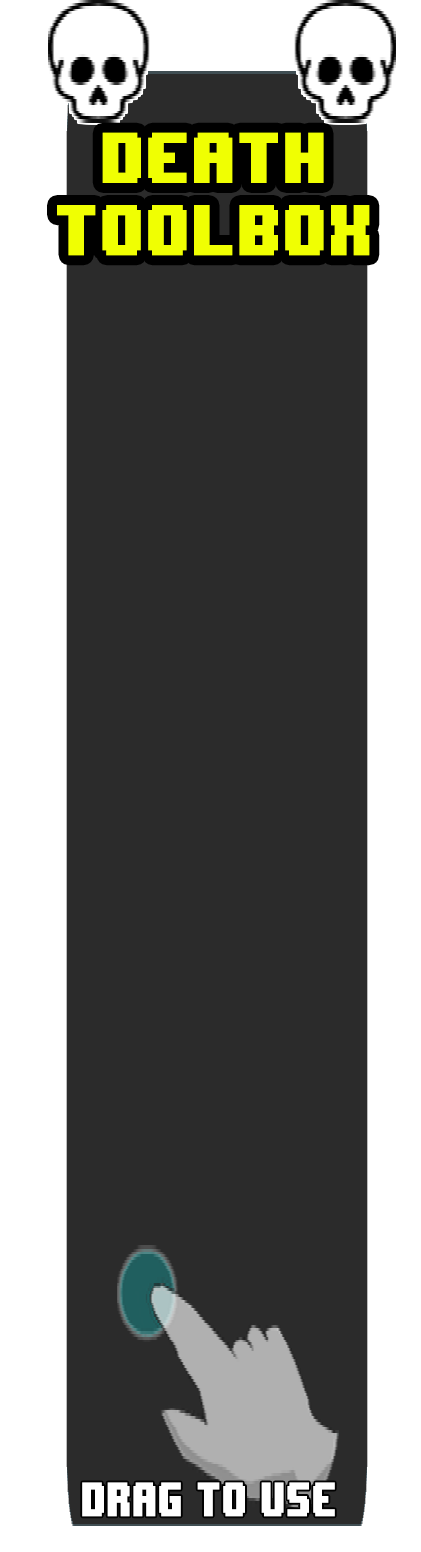
<style>
.page{position:relative;width:421px;height:1552px;background:#2b2b2b}
.page>*{position:absolute;margin:0}
.t1{font:60.2px "8BITWONDERNominal";color:#f0ff02;scale:0.76 1}
.t2{font:40px "8BITWONDERNominal";color:#ffffff;scale:0.64 1}
.t3{font:40px "8BITWONDERNominal";color:#ff0202;scale:0.64 1}
</style>
<div class="page">
<p class="t1" style="left:57px;top:132px;width:313px;height:124px;text-align:center">Death<br>Toolbox</p>
<p class="t2" style="left:82px;top:1482px;width:253px;height:35px"><span class="t3"><br><br><br><br><br><br><br><br><br><br><br><br><br><br><br><br><br><br><br><br><br><br><br><br><br><br></span>Drag to use</p>
</div>
